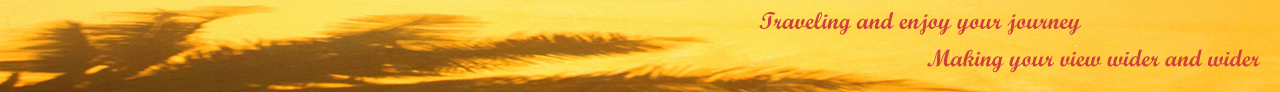
<style>
.page{position:relative;width:1280px;height:92px}
.page>*{position:absolute;margin:0}
.t1{font:24px "ScriptMTBold";color:#d23d3d}
</style>
<div class="page">
<p class="t1" style="left:759px;top:12px;width:323px;height:23px">Traveling and enjoy your journey</p>
<p class="t1" style="left:927px;top:49px;width:333px;height:24px">Making your view wider and wider</p>
</div>
